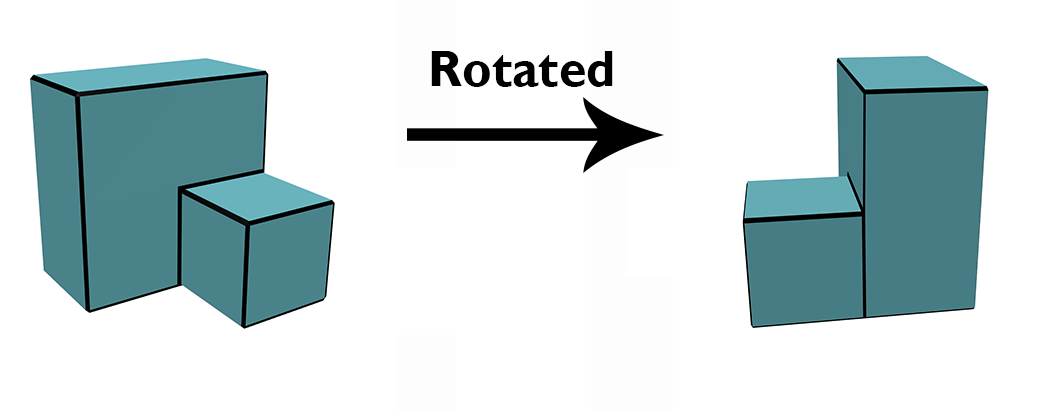
<style>
.page{position:relative;width:1050px;height:410px;background:#ffffff}
.page>*{position:absolute;margin:0}
.t1{font:50px "GillSansMT-Bold";color:#000000}
</style>
<div class="page">
<p class="t1" style="left:431px;top:51px;width:182px;height:36px">Rotated</p>
</div>
